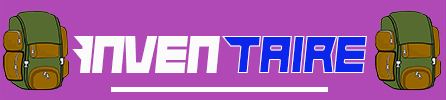
<style>
.page{position:relative;width:446px;height:100px;background:#b049b6}
.page>*{position:absolute;margin:0}
.t1{font:54.2px "Hindsight2020";color:#fbfbfb;scale:0.92 1}
.t2{font:54.2px "Hindsight2020";color:#0b25eb;scale:0.92 1}
</style>
<div class="page">
<p class="t1" style="left:72px;top:36px;width:148px;height:37px">Inven</p>
<p class="t2" style="left:221px;top:36px;width:146px;height:37px">Taire</p>
</div>
